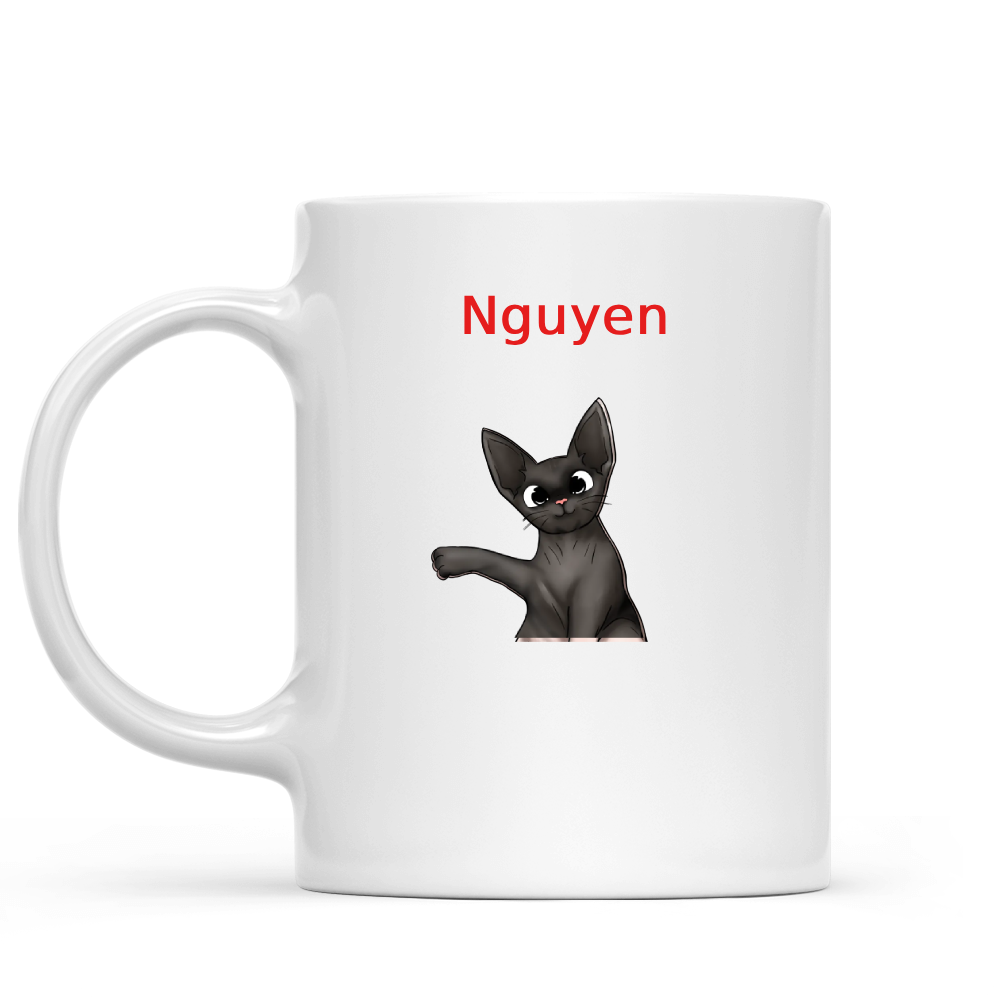
<style>
.page{position:relative;width:1000px;height:1000px;background:#ffffff}
.page>*{position:absolute;margin:0}
.t1{font:52.4px "DejaVuSans";color:#e51d1d;font-weight:bold}
</style>
<div class="page">
<p class="t1" style="left:464px;top:295px;width:202px;height:50px">Nguyen</p>
</div>
